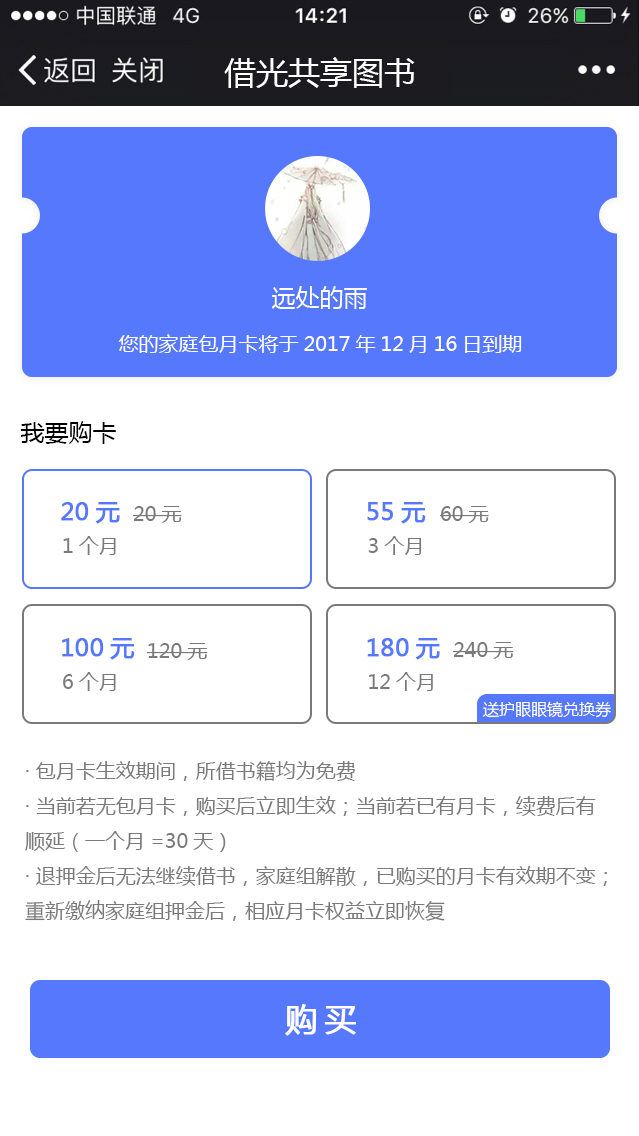
<style>
.page{position:relative;width:639px;height:1136px;background:#ffffff}
.page>*{position:absolute;margin:0}
.t1{font:24px "MicrosoftYaHei";color:#ffffff}
.t2{font:20px "MicrosoftYaHei";color:#ffffff}
.t3{font:24px "MicrosoftYaHei";color:#000000}
.t4{font:24px "MicrosoftYaHei";color:#5578fc;font-weight:bold}
.t5{font:20px "MicrosoftYaHei";color:#7a7a7a}
.t6{font:16px "MicrosoftYaHei";color:#ffffff}
.t7{font:32px "MicrosoftYaHei";letter-spacing:0.2em;color:#ffffff;font-weight:bold}
</style>
<div class="page">
<p class="t1" style="left:272px;top:286px;width:95px;height:23px">远处的雨</p>
<p class="t2" style="left:118px;top:334px;width:404px;height:19px">您的家庭包月卡将于2017年12月16日到期</p>
<p class="t3" style="left:20px;top:421px;width:96px;height:23px">我要购卡</p>
<p class="t4" style="left:61px;top:502px;width:59px;height:22px">20元</p>
<p class="t5" style="left:133px;top:506px;width:49px;height:17px">20元</p>
<p class="t4" style="left:367px;top:502px;width:59px;height:22px">55元</p>
<p class="t5" style="left:440px;top:506px;width:49px;height:17px">60元</p>
<p class="t5" style="left:63px;top:536px;width:53px;height:19px">1个月</p>
<p class="t5" style="left:368px;top:536px;width:54px;height:19px">3个月</p>
<p class="t4" style="left:62px;top:638px;width:73px;height:22px">100元</p>
<p class="t4" style="left:367px;top:638px;width:73px;height:22px">180元</p>
<p class="t5" style="left:147px;top:643px;width:61px;height:17px">120元</p>
<p class="t5" style="left:453px;top:642px;width:61px;height:17px">240元</p>
<p class="t5" style="left:63px;top:672px;width:53px;height:19px">6个月</p>
<p class="t5" style="left:369px;top:672px;width:64px;height:19px">12个月</p>
<p class="t6" style="left:483px;top:701px;width:128px;height:17px">送护眼眼镜兑换券</p>
<p class="t5" style="left:25px;top:761px;width:582px;height:160px">· 包月卡生效期间，所借书籍均为免费<br>· 当前若无包月卡，购买后立即生效；当前若已有月卡，续费后有<br>顺延（一个月=30天）<br>· 退押金后无法继续借书，家庭组解散，已购买的月卡有效期不变；<br>重新缴纳家庭组押金后，相应月卡权益立即恢复</p>
<p class="t7" style="left:285px;top:1004px;width:71px;height:32px">购买</p>
</div>
